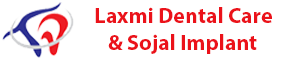
<style>
.page{position:relative;width:300px;height:60px;background:#ffffff}
.page>*{position:absolute;margin:0}
.t1{font:22px "MyriadPro-Bold";color:#eb121a}
</style>
<div class="page">
<p class="t1" style="left:95px;top:7px;width:177px;height:47px">Laxmi Dental Care<br>   &amp; Sojal Implant</p>
</div>
